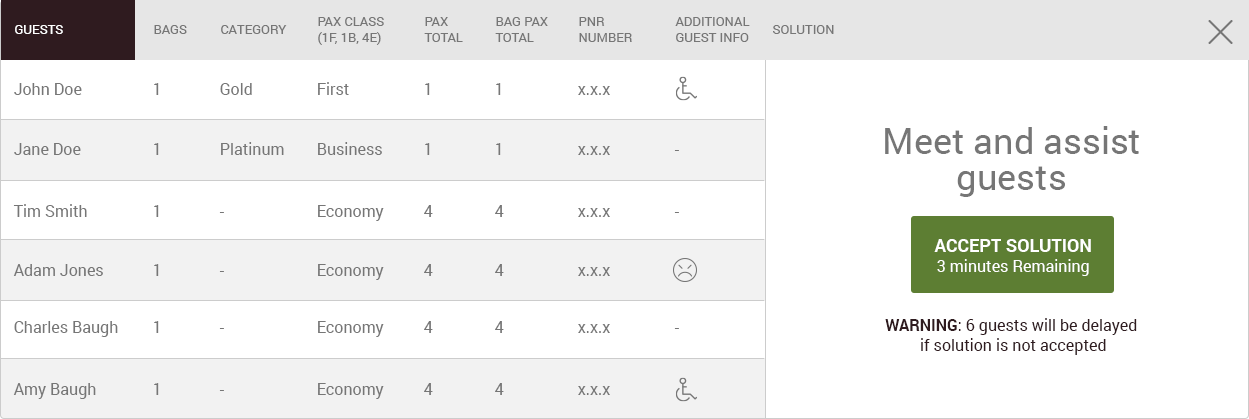
<style>
.page{position:relative;width:1249px;height:419px;background:#ffffff}
.page>*{position:absolute;margin:0}
.t1{font:13px "Roboto-Regular";color:#767676;text-transform:uppercase}
.t2{font:13px "Roboto-Regular";color:#ffffff;text-transform:uppercase}
.t3{font:16px "Roboto-Regular";color:#767676}
.t4{font:36px/36px "Roboto-Regular";color:#767676}
.t5{font:18px "Roboto-Bold";color:#ffffff;text-transform:uppercase}
.t6{font:16px "Roboto-Regular";color:#ffffff}
.t7{font:16px "Roboto-Regular";color:#2f1b1f}
.t8{font:16px "Roboto-Bold";color:#2f1b1f}
</style>
<div class="page">
<p class="t1" style="left:318px;top:17px;width:66px;height:28px">Pax Class<br>(1F, 1B, 4E)</p>
<p class="t1" style="left:424px;top:17px;width:39px;height:25px">Pax<br>Total</p>
<p class="t1" style="left:495px;top:17px;width:53px;height:25px">Bag PAX<br>Total</p>
<p class="t1" style="left:579px;top:17px;width:53px;height:25px">PNR<br>Number</p>
<p class="t1" style="left:675px;top:17px;width:75px;height:25px">Additional<br>Guest Info</p>
<p class="t2" style="left:15px;top:25px;width:48px;height:9px">Guests</p>
<p class="t1" style="left:154px;top:25px;width:33px;height:9px">Bags</p>
<p class="t1" style="left:221px;top:25px;width:66px;height:9px">Category</p>
<p class="t1" style="left:773px;top:25px;width:61px;height:9px">Solution</p>
<p class="t3" style="left:14px;top:83px;width:68px;height:12px">John Doe</p>
<p class="t3" style="left:154px;top:83px;width:5px;height:12px">1</p>
<p class="t3" style="left:220px;top:83px;width:32px;height:12px">Gold</p>
<p class="t3" style="left:318px;top:82px;width:31px;height:13px">First</p>
<p class="t3" style="left:425px;top:83px;width:5px;height:12px">1</p>
<p class="t3" style="left:496px;top:83px;width:5px;height:12px">1</p>
<p class="t3" style="left:578px;top:86px;width:32px;height:9px">x.x.x</p>
<p class="t4" style="left:885px;top:126px;width:254px;height:71px;text-align:center">Meet and assist  guests</p>
<p class="t3" style="left:14px;top:143px;width:67px;height:12px">Jane Doe</p>
<p class="t3" style="left:154px;top:143px;width:5px;height:12px">1</p>
<p class="t3" style="left:221px;top:142px;width:63px;height:13px">Platinum</p>
<p class="t3" style="left:318px;top:142px;width:64px;height:13px">Business</p>
<p class="t3" style="left:425px;top:143px;width:5px;height:12px">1</p>
<p class="t3" style="left:496px;top:143px;width:5px;height:12px">1</p>
<p class="t3" style="left:578px;top:146px;width:32px;height:9px">x.x.x</p>
<p class="t3" style="left:674px;top:150px;width:5px;height:1px">-</p>
<p class="t3" style="left:13px;top:204px;width:74px;height:13px">Tim Smith</p>
<p class="t3" style="left:154px;top:205px;width:5px;height:12px">1</p>
<p class="t3" style="left:318px;top:205px;width:66px;height:16px">Economy</p>
<p class="t3" style="left:424px;top:205px;width:9px;height:12px">4</p>
<p class="t3" style="left:495px;top:205px;width:9px;height:12px">4</p>
<p class="t3" style="left:578px;top:208px;width:32px;height:9px">x.x.x</p>
<p class="t3" style="left:219px;top:212px;width:5px;height:1px">-</p>
<p class="t3" style="left:674px;top:212px;width:5px;height:1px">-</p>
<p class="t5" style="left:934px;top:239px;width:157px;height:13px">Accept Solution</p>
<p class="t3" style="left:13px;top:264px;width:90px;height:12px">Adam Jones</p>
<p class="t3" style="left:154px;top:264px;width:5px;height:12px">1</p>
<p class="t3" style="left:318px;top:264px;width:66px;height:16px">Economy</p>
<p class="t3" style="left:424px;top:264px;width:9px;height:12px">4</p>
<p class="t3" style="left:495px;top:264px;width:9px;height:12px">4</p>
<p class="t3" style="left:578px;top:267px;width:32px;height:9px">x.x.x</p>
<p class="t6" style="left:937px;top:259px;width:152px;height:17px">3 minutes Remaining</p>
<p class="t3" style="left:219px;top:271px;width:5px;height:1px">-</p>
<p class="t7" style="left:885px;top:318px;width:252px;height:37px;text-align:center"><span class="t8">WARNING</span>: 6 guests will be delayed <br>if solution is not accepted</p>
<p class="t3" style="left:14px;top:321px;width:104px;height:16px">Charles Baugh</p>
<p class="t3" style="left:154px;top:321px;width:5px;height:12px">1</p>
<p class="t3" style="left:219px;top:328px;width:5px;height:1px">-</p>
<p class="t3" style="left:318px;top:321px;width:66px;height:16px">Economy</p>
<p class="t3" style="left:424px;top:321px;width:9px;height:12px">4</p>
<p class="t3" style="left:495px;top:321px;width:9px;height:12px">4</p>
<p class="t3" style="left:578px;top:324px;width:32px;height:9px">x.x.x</p>
<p class="t3" style="left:674px;top:328px;width:5px;height:1px">-</p>
<p class="t3" style="left:13px;top:383px;width:83px;height:16px">Amy Baugh</p>
<p class="t3" style="left:154px;top:383px;width:5px;height:12px">1</p>
<p class="t3" style="left:219px;top:390px;width:5px;height:1px">-</p>
<p class="t3" style="left:318px;top:383px;width:66px;height:16px">Economy</p>
<p class="t3" style="left:424px;top:383px;width:9px;height:12px">4</p>
<p class="t3" style="left:495px;top:383px;width:9px;height:12px">4</p>
<p class="t3" style="left:578px;top:386px;width:32px;height:9px">x.x.x</p>
</div>
